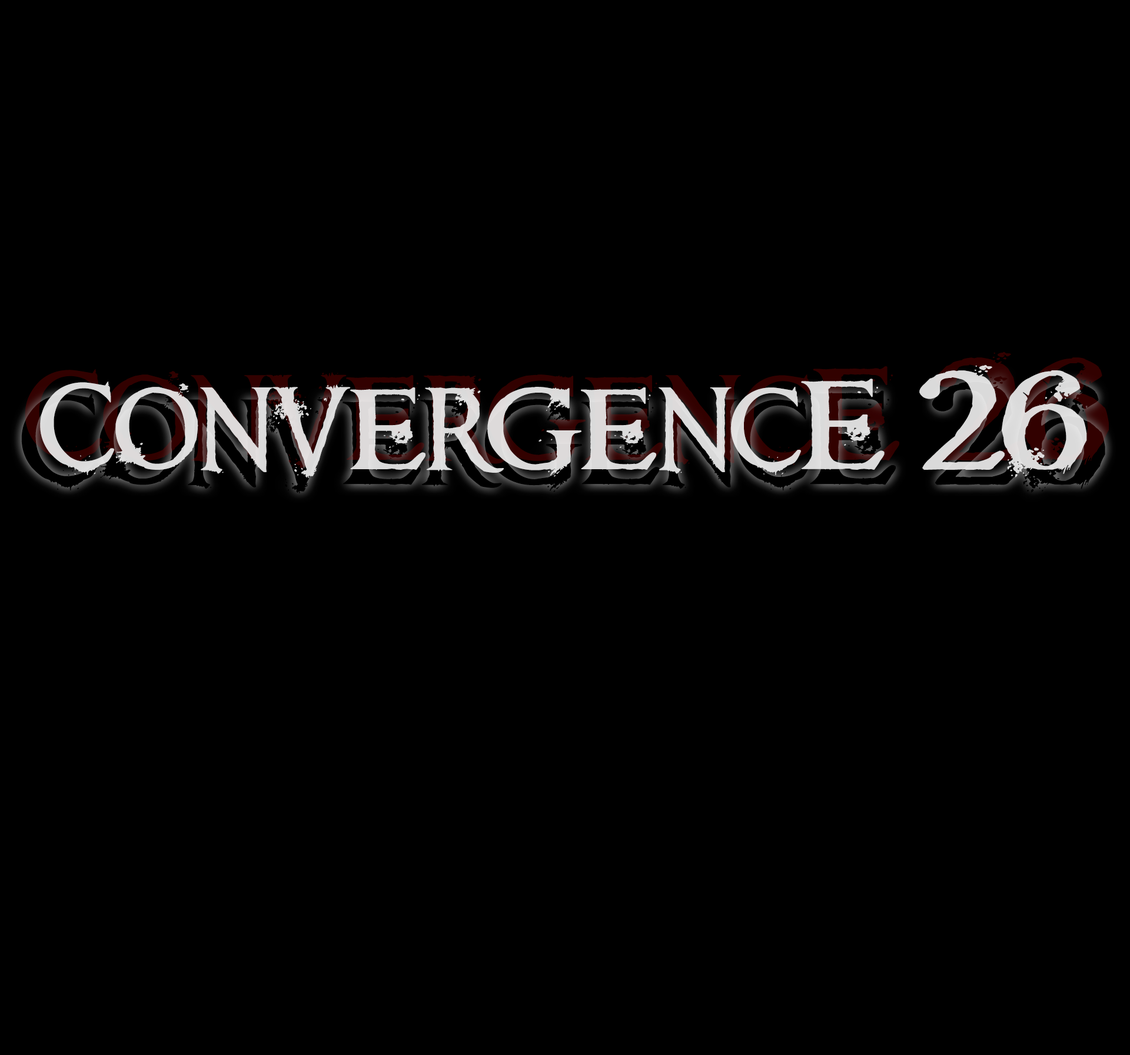
<style>
.page{position:relative;width:1130px;height:1055px;background:#000000}
.page>*{position:absolute;margin:0}
.t1{font:121px "Requiem";color:#dddada}
.t2{font:121px "Requiem";letter-spacing:-0.14em;color:#dddada}
</style>
<div class="page">
<p class="t1" style="left:40px;top:365px;width:1047px;height:113px">Conve<span class="t2">r</span>gencE 26</p>
</div>
